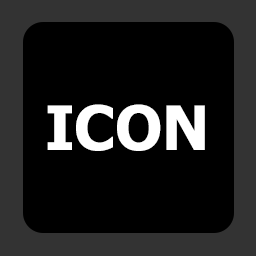
<style>
.page{position:relative;width:256px;height:256px;background:#000000}
.page>*{position:absolute;margin:0}
.t1{font:61.2px "Tahoma-Bold";color:#ffffff;text-transform:uppercase}
</style>
<div class="page">
<p class="t1" style="left:47px;top:104px;width:158px;height:47px">icon</p>
</div>
